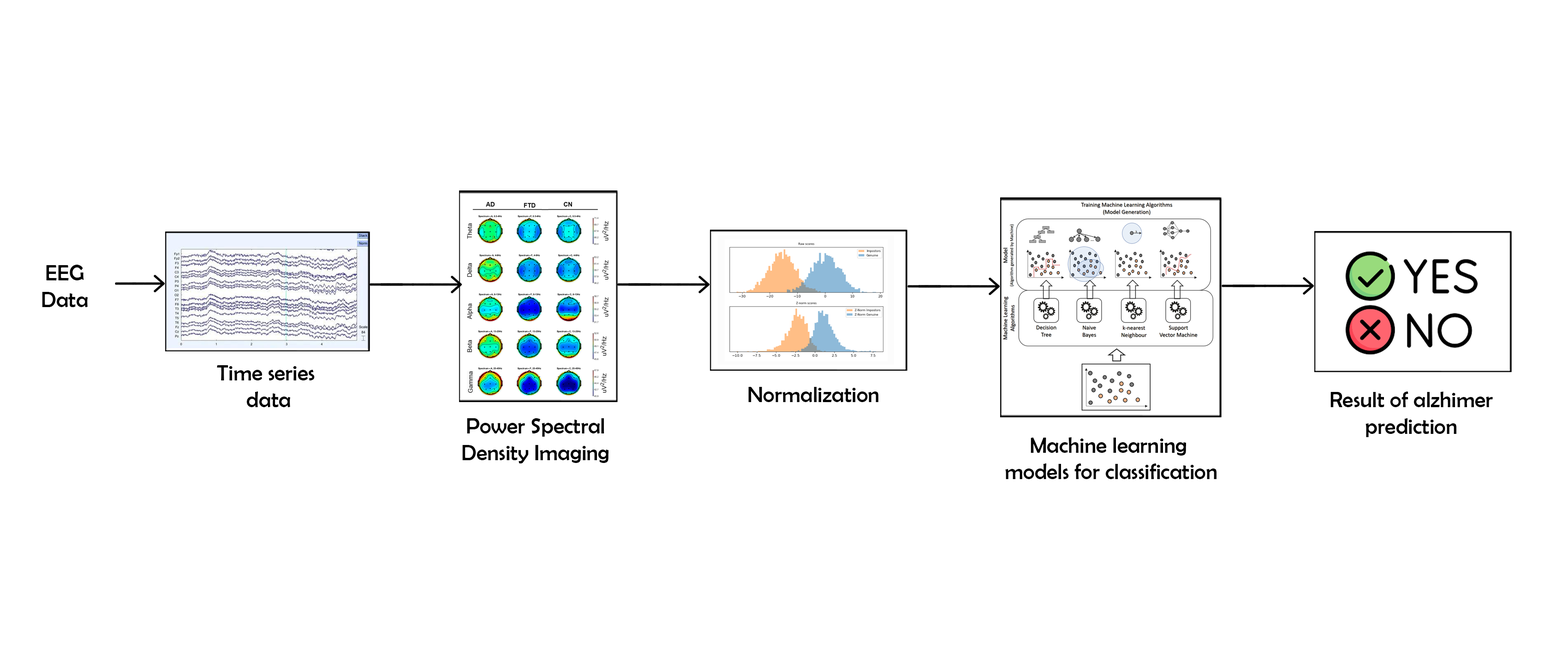
<style>
.page{position:relative;width:1568px;height:664px;background:#ffffff}
.page>*{position:absolute;margin:0}
.t1{font:22.1px "BerlinSansFB-Reg";color:#000000}
</style>
<div class="page">
<p class="t1" style="left:42px;top:265px;width:46px;height:42px;text-align:center">EEG<br>Data</p>
<p class="t1" style="left:217px;top:365px;width:98px;height:42px;text-align:center">Time series <br>data</p>
<p class="t1" style="left:748px;top:387px;width:130px;height:15px">Normalization</p>
<p class="t1" style="left:1330px;top:392px;width:163px;height:45px;text-align:center">Result of alzhimer<br>prediction</p>
<p class="t1" style="left:462px;top:418px;width:146px;height:46px;text-align:center">Power Spectral<br>Density Imaging</p>
<p class="t1" style="left:1005px;top:437px;width:211px;height:42px;text-align:center">Machine learning <br>models for classification</p>
</div>
